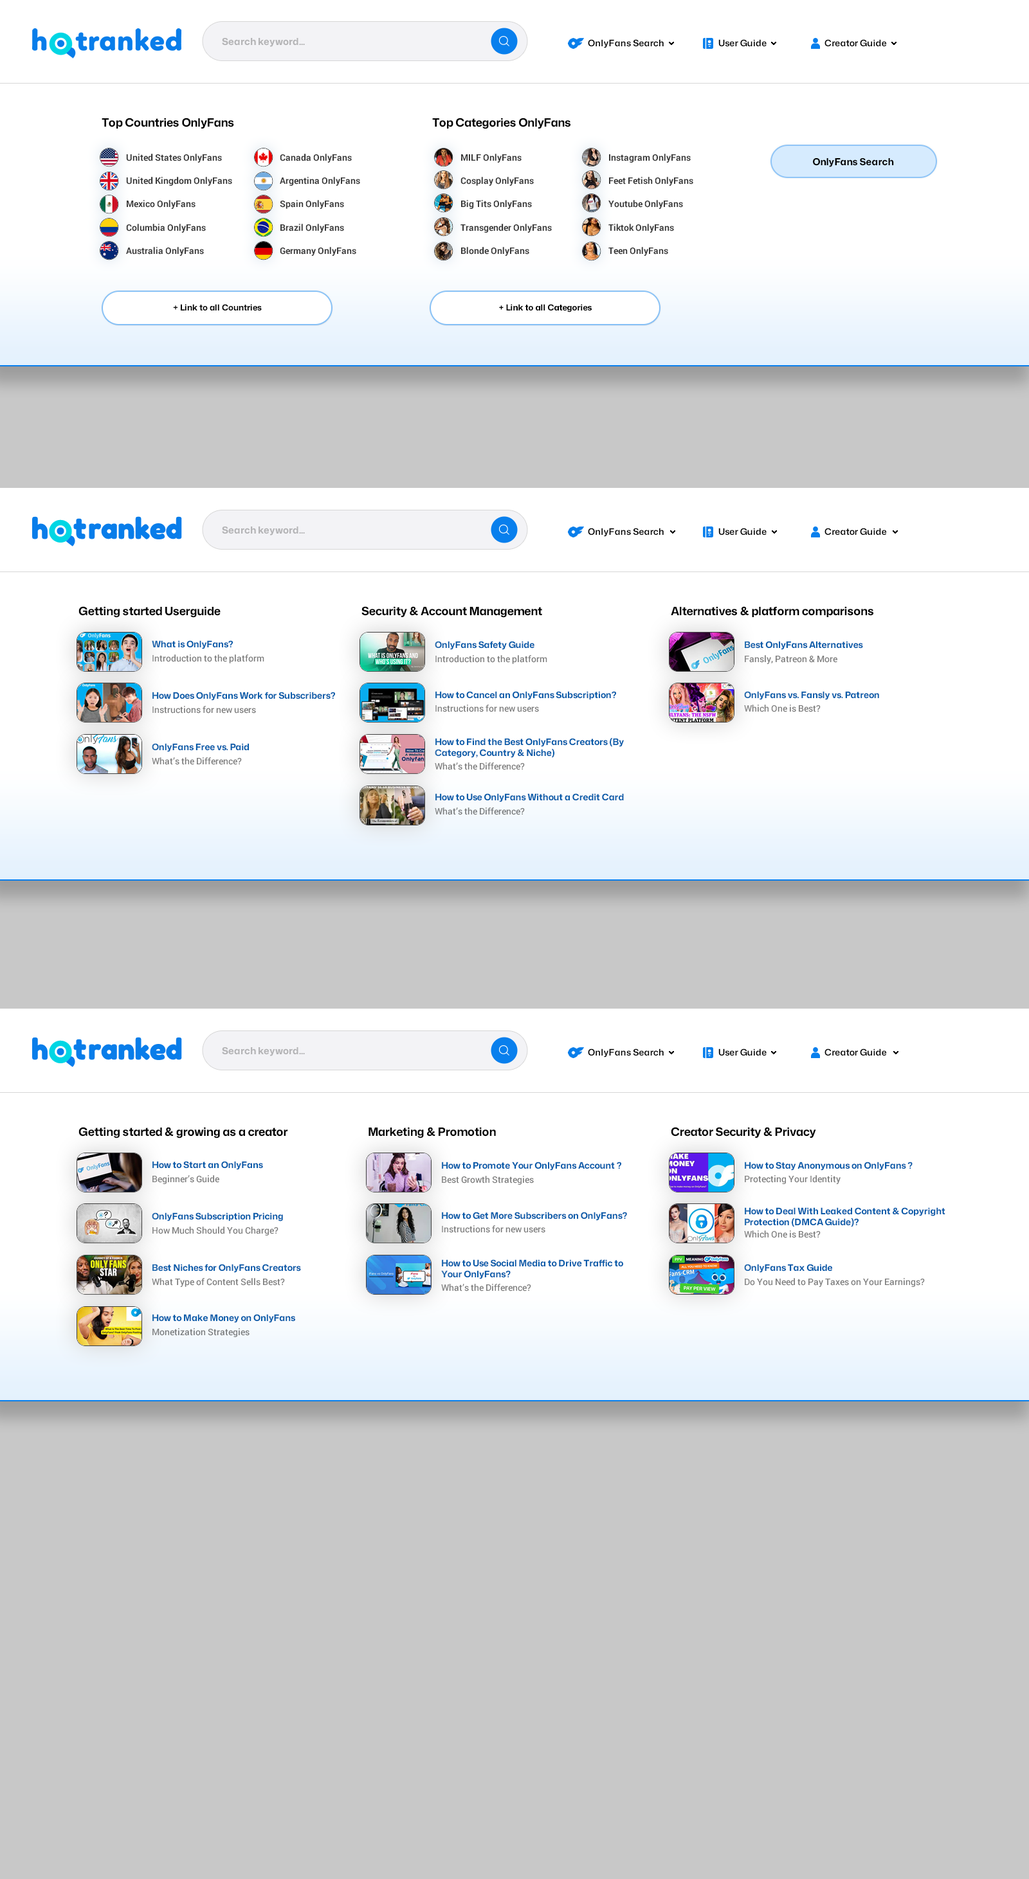
<style>
.page{position:relative;width:1029px;height:1879px;background:#c8c8c8}
.page>*{position:absolute;margin:0}
.t1{font:9.6px "MonaSans-Bold";color:#b4b4b6}
.t2{font:9px "MonaSans-SemiBold";letter-spacing:0.01em;color:#000000}
.t3{font:11.6px "MonaSans-Bold";letter-spacing:-0.01em;color:#000000}
.t4{font:9px/23.4px "Roboto-Bold";color:#3a3a3a}
.t5{font:9.6px "MonaSans-Bold";color:#000000}
.t6{font:8.4px "MonaSans-Bold";color:#000000}
.t7{font:9px "MonaSans-Bold";letter-spacing:-0.01em;color:#065caa}
.t8{font:9px "Roboto-Medium";color:#7d7d7d}
.t9{font:9px/10.8px "MonaSans-Bold";letter-spacing:-0.01em;color:#065caa}
.t10{font:9px "Roboto-Medium";color:#797b7c}
.t11{font:9px "MonaSans-Bold";letter-spacing:-0.01em;color:#065baa}
.t12{font:9px/10.8px "MonaSans-Bold";letter-spacing:-0.01em;color:#065baa}
</style>
<div class="page">
<p class="t1" style="left:222px;top:38px;width:83px;height:9px">Search keyword...</p>
<p class="t2" style="left:588px;top:39px;width:75px;height:9px">OnlyFans Search</p>
<p class="t2" style="left:718px;top:39px;width:48px;height:8px">User Guide</p>
<p class="t2" style="left:824px;top:39px;width:63px;height:8px">Creator Guide</p>
<p class="t3" style="left:102px;top:118px;width:132px;height:11px">Top Countries OnlyFans</p>
<p class="t3" style="left:432px;top:118px;width:138px;height:11px">Top Categories OnlyFans</p>
<p class="t4" style="left:126px;top:154px;width:106px;height:102px">United States OnlyFans<br>United Kingdom OnlyFans<br>Mexico OnlyFans<br>Columbia OnlyFans<br>Australia OnlyFans</p>
<p class="t4" style="left:280px;top:154px;width:80px;height:102px">Canada OnlyFans<br>Argentina OnlyFans<br>Spain OnlyFans<br>Brazil OnlyFans<br>Germany OnlyFans</p>
<p class="t4" style="left:460px;top:154px;width:92px;height:102px">MILF OnlyFans<br>Cosplay OnlyFans<br>Big Tits OnlyFans<br>Transgender OnlyFans<br>Blonde OnlyFans</p>
<p class="t4" style="left:608px;top:154px;width:85px;height:102px">Instagram OnlyFans<br>Feet Fetish OnlyFans<br>Youtube OnlyFans<br>Tiktok OnlyFans<br>Teen OnlyFans</p>
<p class="t5" style="left:813px;top:158px;width:81px;height:9px">OnlyFans Search</p>
<p class="t6" style="left:173px;top:304px;width:89px;height:7px">+ Link to all Countries</p>
<p class="t6" style="left:499px;top:304px;width:92px;height:8px">+ Link to all Categories</p>
<p class="t1" style="left:222px;top:526px;width:83px;height:10px">Search keyword...</p>
<p class="t2" style="left:588px;top:528px;width:75px;height:9px">OnlyFans Search</p>
<p class="t2" style="left:718px;top:528px;width:48px;height:8px">User Guide</p>
<p class="t2" style="left:824px;top:528px;width:63px;height:8px">Creator Guide</p>
<p class="t3" style="left:78px;top:606px;width:143px;height:12px">Getting started Userguide</p>
<p class="t3" style="left:361px;top:606px;width:181px;height:12px">Security &amp; Account Management</p>
<p class="t3" style="left:670px;top:606px;width:203px;height:11px">Alternatives &amp; platform comparisons</p>
<p class="t7" style="left:152px;top:640px;width:81px;height:9px">What is OnlyFans?</p>
<p class="t7" style="left:435px;top:641px;width:99px;height:9px">OnlyFans Safety Guide</p>
<p class="t7" style="left:744px;top:641px;width:119px;height:9px">Best OnlyFans Alternatives</p>
<p class="t8" style="left:152px;top:654px;width:112px;height:9px">Introduction to the platform</p>
<p class="t8" style="left:435px;top:655px;width:112px;height:9px">Introduction to the platform</p>
<p class="t8" style="left:744px;top:655px;width:93px;height:9px">Fansly, Patreon &amp; More</p>
<p class="t7" style="left:152px;top:692px;width:183px;height:9px">How Does OnlyFans Work for Subscribers?</p>
<p class="t7" style="left:435px;top:691px;width:181px;height:9px">How to Cancel an OnlyFans Subscription?</p>
<p class="t7" style="left:744px;top:691px;width:135px;height:9px">OnlyFans vs. Fansly vs. Patreon</p>
<p class="t8" style="left:152px;top:706px;width:104px;height:8px">Instructions for new users</p>
<p class="t8" style="left:435px;top:705px;width:104px;height:7px">Instructions for new users</p>
<p class="t8" style="left:744px;top:705px;width:76px;height:7px">Which One is Best?</p>
<p class="t7" style="left:152px;top:743px;width:97px;height:9px">OnlyFans Free vs. Paid</p>
<p class="t9" style="left:435px;top:738px;width:189px;height:20px">How to Find the Best OnlyFans Creators (By Category, Country &amp; Niche)</p>
<p class="t8" style="left:152px;top:757px;width:90px;height:8px">What’s the Difference?</p>
<p class="t8" style="left:435px;top:762px;width:90px;height:8px">What’s the Difference?</p>
<p class="t7" style="left:435px;top:793px;width:189px;height:9px">How to Use OnlyFans Without a Credit Card</p>
<p class="t10" style="left:435px;top:807px;width:90px;height:8px">What’s the Difference?</p>
<p class="t1" style="left:222px;top:1047px;width:83px;height:9px">Search keyword...</p>
<p class="t2" style="left:588px;top:1048px;width:75px;height:10px">OnlyFans Search</p>
<p class="t2" style="left:718px;top:1048px;width:48px;height:8px">User Guide</p>
<p class="t2" style="left:824px;top:1048px;width:63px;height:8px">Creator Guide</p>
<p class="t3" style="left:78px;top:1127px;width:210px;height:11px">Getting started &amp; growing as a creator</p>
<p class="t3" style="left:368px;top:1127px;width:128px;height:11px">Marketing &amp; Promotion</p>
<p class="t3" style="left:670px;top:1127px;width:146px;height:11px">Creator Security &amp; Privacy</p>
<p class="t11" style="left:152px;top:1161px;width:111px;height:9px">How to Start an OnlyFans</p>
<p class="t11" style="left:442px;top:1162px;width:179px;height:9px">How to Promote Your OnlyFans Account ?</p>
<p class="t11" style="left:744px;top:1162px;width:168px;height:9px">How to Stay Anonymous on OnlyFans ?</p>
<p class="t8" style="left:152px;top:1175px;width:67px;height:9px">Beginner’s Guide</p>
<p class="t8" style="left:442px;top:1176px;width:92px;height:9px">Best Growth Strategies</p>
<p class="t8" style="left:744px;top:1175px;width:96px;height:9px">Protecting Your Identity</p>
<p class="t11" style="left:152px;top:1212px;width:131px;height:9px">OnlyFans Subscription Pricing</p>
<p class="t11" style="left:442px;top:1212px;width:185px;height:9px">How to Get More Subscribers on OnlyFans?</p>
<p class="t12" style="left:744px;top:1207px;width:201px;height:20px">How to Deal With Leaked Content &amp; Copyright Protection (DMCA Guide)?</p>
<p class="t8" style="left:152px;top:1227px;width:126px;height:9px">How Much Should You Charge?</p>
<p class="t8" style="left:442px;top:1225px;width:103px;height:8px">Instructions for new users</p>
<p class="t8" style="left:744px;top:1230px;width:76px;height:8px">Which One is Best?</p>
<p class="t11" style="left:152px;top:1264px;width:149px;height:9px">Best Niches for OnlyFans Creators</p>
<p class="t12" style="left:441px;top:1259px;width:182px;height:20px">How to Use Social Media to Drive Traffic to Your OnlyFans?</p>
<p class="t11" style="left:744px;top:1264px;width:88px;height:9px">OnlyFans Tax Guide</p>
<p class="t8" style="left:152px;top:1278px;width:133px;height:9px">What Type of Content Sells Best?</p>
<p class="t8" style="left:744px;top:1278px;width:180px;height:9px">Do You Need to Pay Taxes on Your Earnings?</p>
<p class="t8" style="left:441px;top:1284px;width:90px;height:8px">What’s the Difference?</p>
<p class="t7" style="left:152px;top:1314px;width:143px;height:9px">How to Make Money on OnlyFans</p>
<p class="t10" style="left:152px;top:1328px;width:97px;height:9px">Monetization Strategies</p>
</div>
